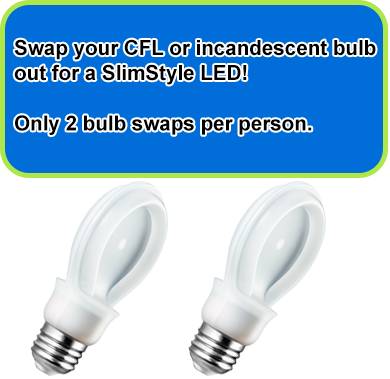
<style>
.page{position:relative;width:390px;height:379px;background:#ffffff}
.page>*{position:absolute;margin:0}
.t1{font:20.9px "Arial-BoldMT";letter-spacing:-0.005em;color:#000000}
</style>
<div class="page">
<p class="t1" style="left:14px;top:39px;width:362px;height:96px">Swap your CFL or incandescent bulb<br>out for a SlimStyle LED!<br><br>Only 2 bulb swaps per person.</p>
</div>
